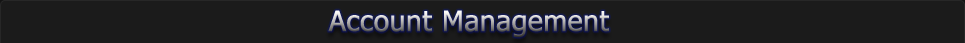
<style>
.page{position:relative;width:965px;height:43px;background:#1b1b1b}
.page>*{position:absolute;margin:0}
.t1{font:28px "Tahoma";font-weight:bold}
</style>
<div class="page">
<p class="t1" style="left:328px;top:10px;width:281px;height:28px">Account Management</p>
</div>
